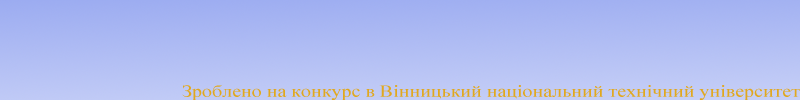
<style>
.page{position:relative;width:800px;height:100px}
.page>*{position:absolute;margin:0}
.t1{font:16.7px "TimesNewRomanPSMT";color:#e1a81e;scale:1.2 1}
</style>
<div class="page">
<p class="t1" style="left:182px;top:85px;width:618px;height:16px">Зроблено на конкурс в Вінницький національний технічний університет</p>
</div>
